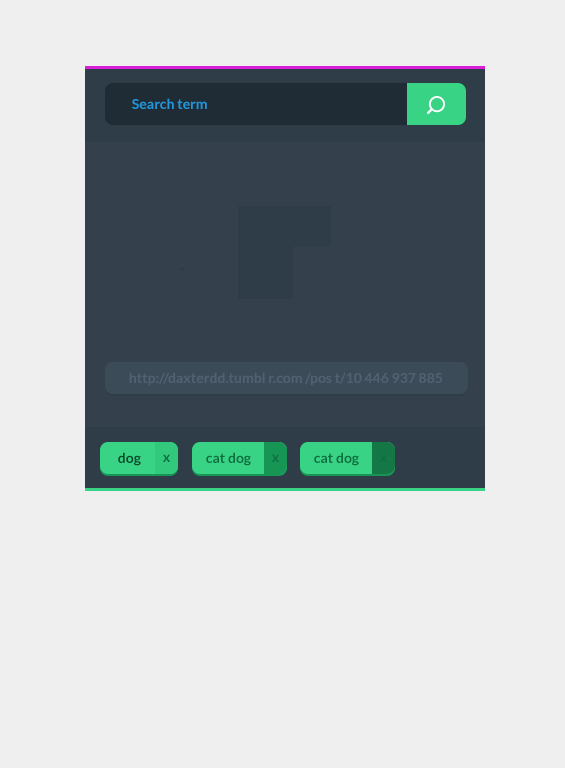
<style>
.page{position:relative;width:565px;height:768px;background:#efefef}
.page>*{position:absolute;margin:0}
.t1{font:14px "Lato-Bold";color:#2196d9}
.t2{font:14px "Lato-Bold";color:#506272}
.t3{font:14px "Lato-Bold";color:#084b29}
.t4{font:14px "Lato-Bold";color:#0d703e}
</style>
<div class="page">
<p class="t1" style="left:132px;top:98px;width:75px;height:11px">Search term</p>
<p class="t2" style="left:129px;top:372px;width:313px;height:14px">http://daxterdd.tumbl r.com /pos t/10 446 937 885 6/advent-meme-ill-b e-home-for-christmas-jake</p>
<p class="t3" style="left:118px;top:452px;width:23px;height:14px">dog</p>
<p class="t4" style="left:163px;top:454px;width:7px;height:8px">x</p>
<p class="t4" style="left:206px;top:452px;width:45px;height:14px">cat dog</p>
<p class="t4" style="left:272px;top:454px;width:7px;height:8px">x</p>
<p class="t4" style="left:314px;top:452px;width:45px;height:14px">cat dog</p>
<p class="t4" style="left:380px;top:454px;width:7px;height:8px">x</p>
</div>
